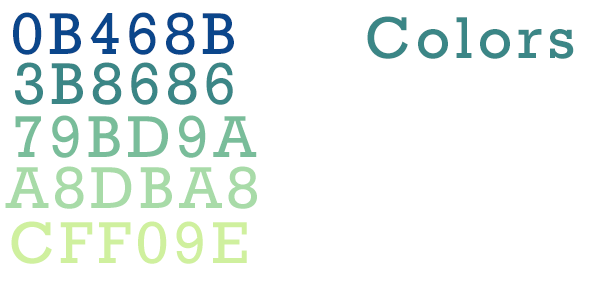
<style>
.page{position:relative;width:600px;height:300px;background:#ffffff}
.page>*{position:absolute;margin:0}
.t1{font:60px "Rockwell";letter-spacing:0.085em;color:#0b468b}
.t2{font:60px "Rockwell";letter-spacing:0.085em;color:#3b8686}
.t3{font:60px "Rockwell";letter-spacing:0.085em;color:#79bd9a}
.t4{font:60px "Rockwell";letter-spacing:0.085em;color:#a8dba8}
.t5{font:60px "Rockwell";letter-spacing:0.085em;color:#cff09e}
</style>
<div class="page">
<p class="t1" style="left:13px;top:12px;width:221px;height:43px">0B468B</p>
<p class="t2" style="left:367px;top:16px;width:207px;height:43px">Colors</p>
<p class="t2" style="left:15px;top:62px;width:218px;height:43px">3B8686</p>
<p class="t3" style="left:15px;top:115px;width:242px;height:43px">79BD9A</p>
<p class="t4" style="left:5px;top:166px;width:252px;height:43px">A8DBA8</p>
<p class="t5" style="left:11px;top:221px;width:236px;height:43px">CFF09E</p>
</div>
